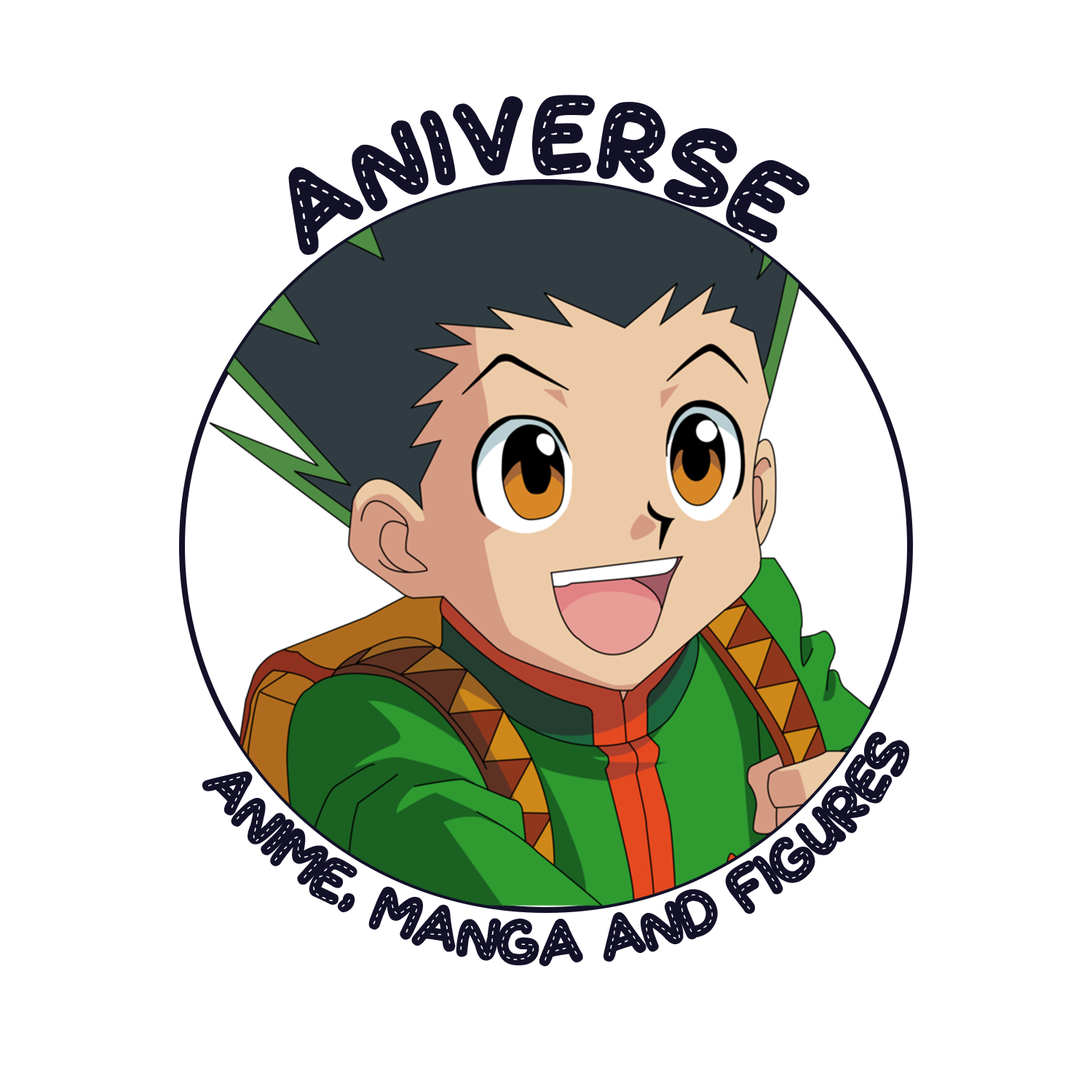
<style>
.page{position:relative;width:1092px;height:1092px;background:#ffffff}
.page>*{position:absolute;margin:0}
.t1{font:87.4px "CuteStitch";color:#121128}
.t2{font:50.2px "CuteStitch";color:#121128}
</style>
<div class="page">
<p class="t1" style="left:288px;top:95px;width:522px;height:160px;rotate:2deg">Aniverse</p>
<p class="t2" style="left:202px;top:732px;width:707px;height:235px;rotate:5deg">Anime, Manga and figures</p>
</div>
